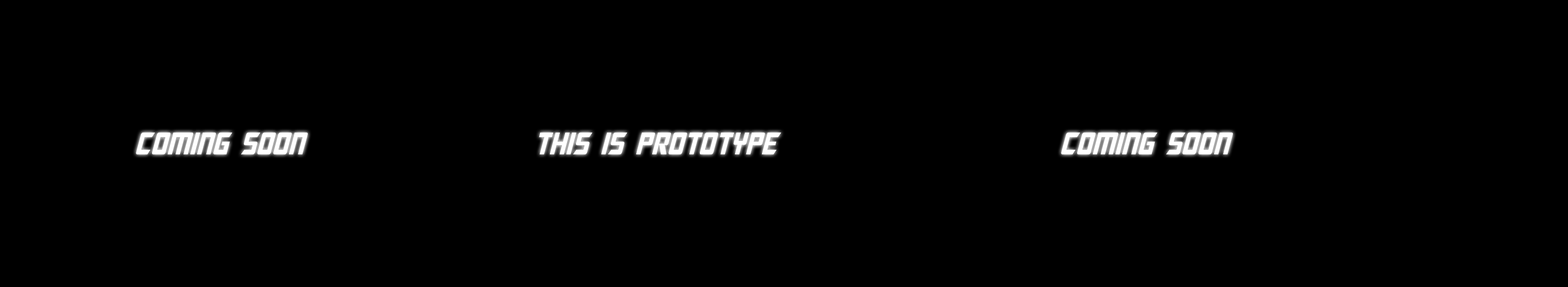
<style>
.page{position:relative;width:1568px;height:287px;background:#000000}
.page>*{position:absolute;margin:0}
.t1{font:31.4px "MegatronCondensed-Italic";color:#ffffff}
</style>
<div class="page">
<p class="t1" style="left:136px;top:133px;width:172px;height:22px">coming soon</p>
<p class="t1" style="left:539px;top:133px;width:242px;height:22px">this is prototype</p>
<p class="t1" style="left:1061px;top:133px;width:172px;height:22px">coming soon</p>
</div>
